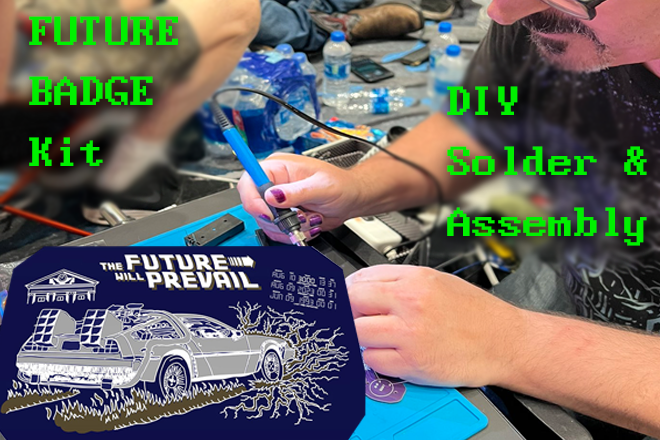
<style>
.page{position:relative;width:660px;height:440px}
.page>*{position:absolute;margin:0}
.t1{font:50.7px "Px437_ATT_PC6300";color:#00f000}
</style>
<div class="page">
<p class="t1" style="left:29px;top:16px;width:149px;height:150px">FUTURE<br>BADGE<br>Kit</p>
<p class="t1" style="left:447px;top:86px;width:200px;height:160px">DIY<br>Solder &amp;<br>Assembly</p>
</div>
